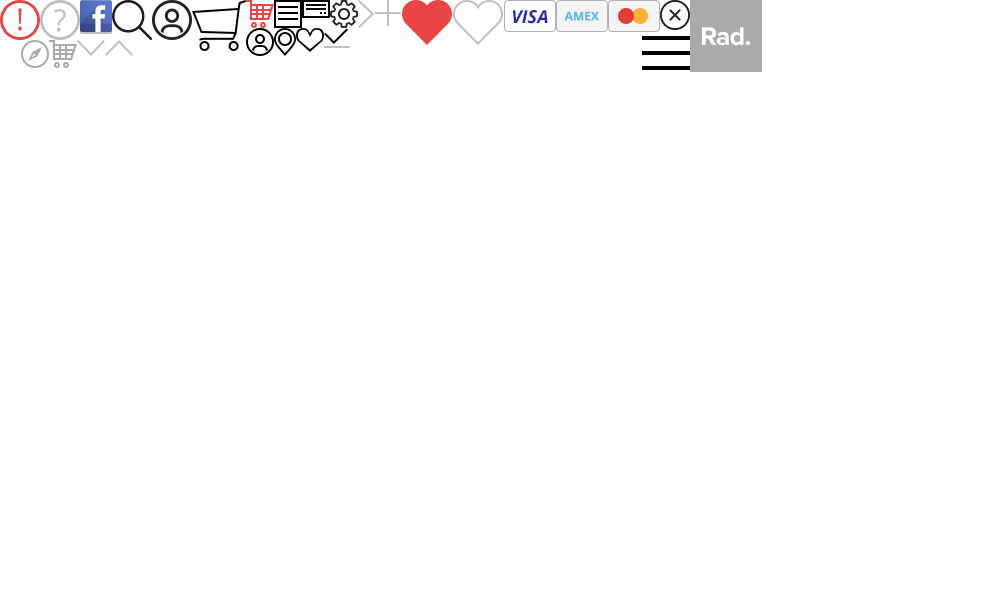
<style>
.page{position:relative;width:1000px;height:600px;background:#ffffff}
.page>*{position:absolute;margin:0}
.t1{font:18px "OpenSans-BoldItalic";color:#2529a9}
.t2{font:12px "OpenSans-Bold";color:#60baeb}
</style>
<div class="page">
<p class="t1" style="left:513px;top:10px;width:35px;height:14px">VISA</p>
<p class="t2" style="left:564px;top:11px;width:35px;height:10px">AMEX</p>
</div>
